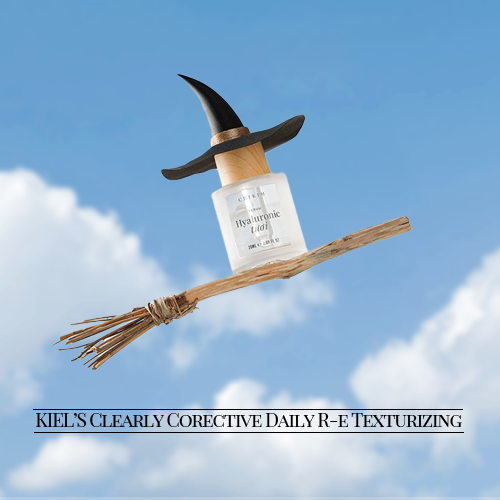
<style>
.page{position:relative;width:500px;height:500px}
.page>*{position:absolute;margin:0}
.t1{font:19.3px "PlayfairDisplaySC-Regular";letter-spacing:-0.06em;color:#000000}
</style>
<div class="page">
<p class="t1" style="left:36px;top:413px;width:426px;height:14px">KIEL’S Clearly Corective Daily R-e Texturizing</p>
</div>
